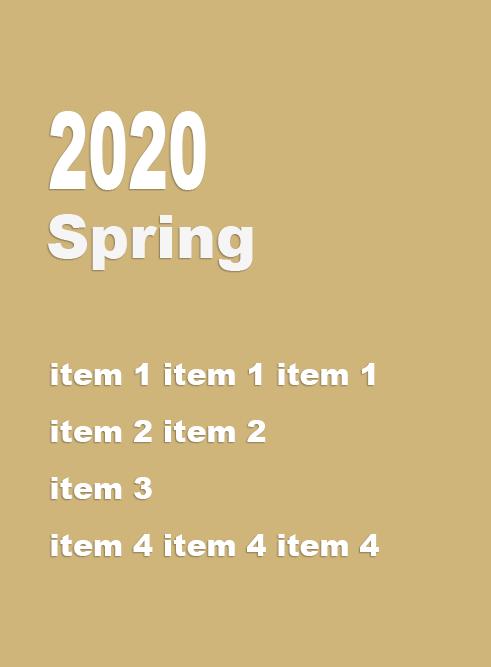
<style>
.page{position:relative;width:491px;height:667px;background:#cfb57a}
.page>*{position:absolute;margin:0}
.t1{font:108px "Arial-Black";color:#ffffff;scale:0.56 1}
.t2{font:60px "Arial-Black";color:#f5f5f5}
.t3{font:30px/57px "Arial-Black";color:#ffffff}
</style>
<div class="page">
<p class="t1" style="left:49px;top:111px;width:157px;height:79px">2020</p>
<p class="t2" style="left:48px;top:214px;width:205px;height:57px">Spring</p>
<p class="t3" style="left:51px;top:363px;width:328px;height:193px">item 1 item 1 item 1<br>item 2 item 2<br>item 3<br>item 4 item 4 item 4</p>
</div>
